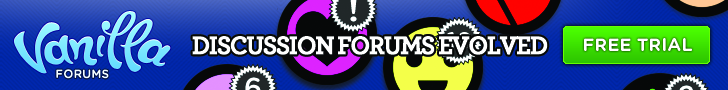
<style>
.page{position:relative;width:728px;height:90px}
.page>*{position:absolute;margin:0}
.t1{font:27px "Archer-BoldLF";letter-spacing:-0.075em;color:#ffffff;font-weight:bold;scale:0.95 1}
.t2{font:18px "GothamRounded-Bold";color:#ffffff}
.t3{font:12px "GothamRounded-Bold";color:#f5ffff}
</style>
<div class="page">
<p class="t1" style="left:192px;top:36px;width:356px;height:19px">DISCUSSION FORUMS EVOLVED</p>
<p class="t2" style="left:584px;top:38px;width:108px;height:13px">FREE TRIAL</p>
<p class="t3" style="left:56px;top:69px;width:53px;height:10px">FORUMS</p>
</div>
